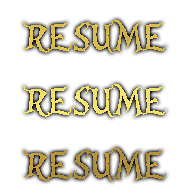
<style>
.page{position:relative;width:192px;height:192px;background:#ffffff}
.page>*{position:absolute;margin:0}
.t1{font:42px "AliceinWonderland";color:#dcbf4b}
.t2{font:42px "AliceinWonderland";color:#f5e46a}
.t3{font:42px "AliceinWonderland";color:#b89538}
</style>
<div class="page">
<p class="t1" style="left:23px;top:20px;width:143px;height:33px">RESUME</p>
<p class="t2" style="left:23px;top:84px;width:143px;height:33px">RESUME</p>
<p class="t3" style="left:23px;top:148px;width:143px;height:33px">RESUME</p>
</div>
